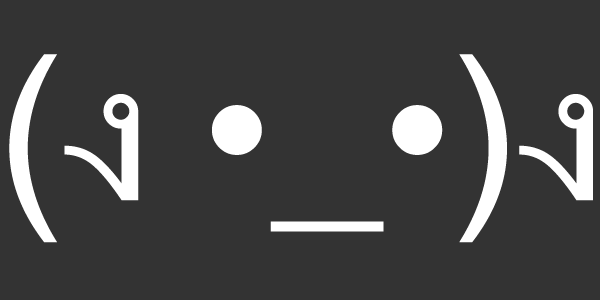
<style>
.page{position:relative;width:600px;height:300px;background:#333333}
.page>*{position:absolute;margin:0}
.t1{font:200px "MicrosoftSansSerif";color:#ffffff}
</style>
<div class="page">
<p class="t1" style="left:9px;top:54px;width:584px;height:189px">(ง •_•)ง</p>
</div>
